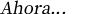
<style>
.page{position:relative;width:93px;height:14px;background:#ffffff}
.page>*{position:absolute;margin:0}
.t1{font:20px "OfficialFateFont-Medium";color:#000000;font-style:italic}
</style>
<div class="page">
<p class="t1" style="left:0px;top:0px;width:66px;height:15px">Ahora...</p>
</div>
